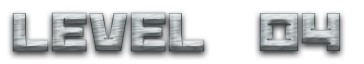
<style>
.page{position:relative;width:364px;height:64px;background:#ffffff}
.page>*{position:absolute;margin:0}
.t1{font:60px "BananaBrick"}
</style>
<div class="page">
<p class="t1" style="left:12px;top:12px;width:329px;height:40px">Level  04</p>
</div>
